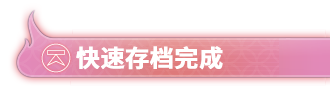
<style>
.page{position:relative;width:330px;height:90px;background:#ffffff}
.page>*{position:absolute;margin:0}
.t1{font:24px "SourceHanSansSC-Bold";color:#ffffff;font-weight:bold}
</style>
<div class="page">
<p class="t1" style="left:76px;top:46px;width:147px;height:24px">快速存档完成</p>
</div>
